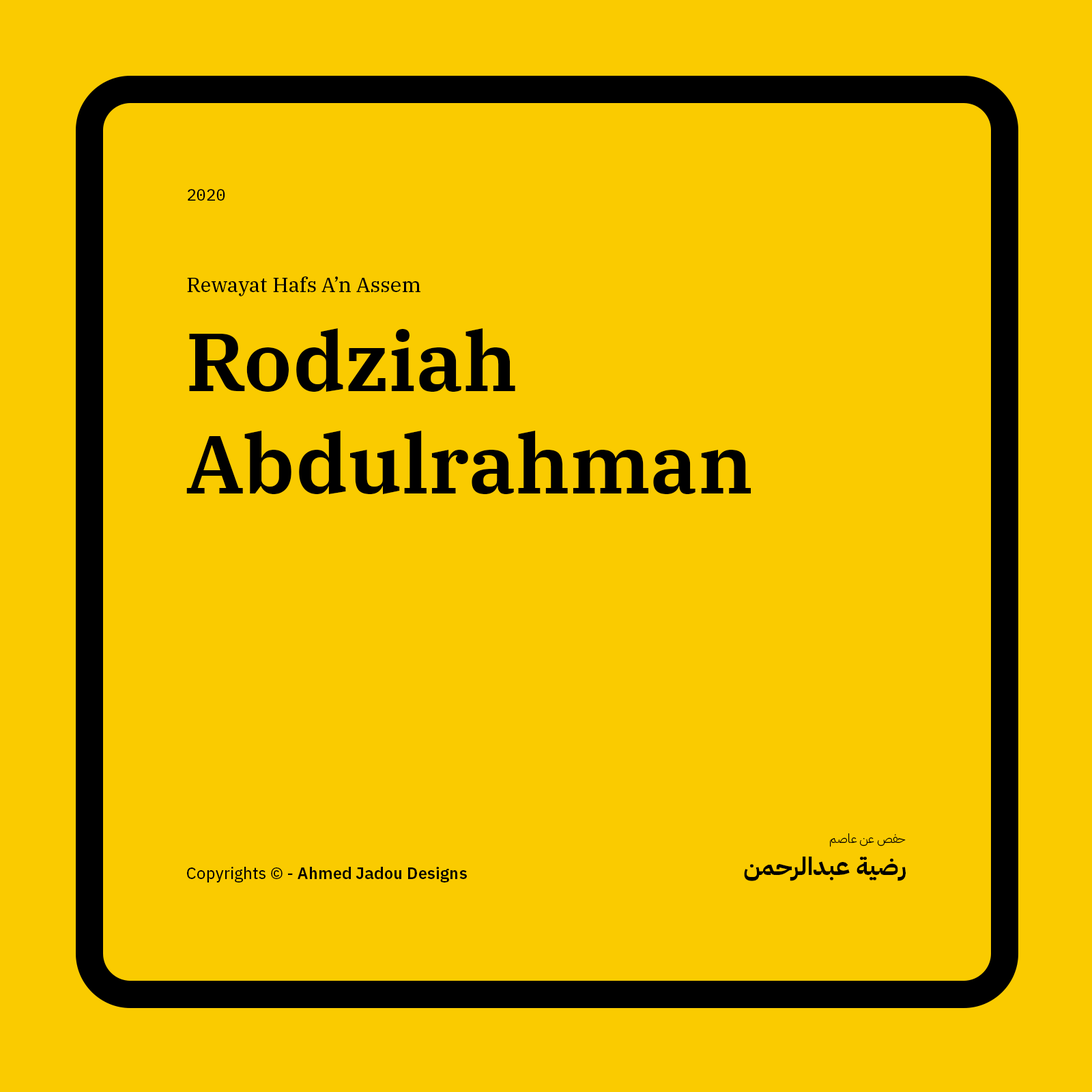
<style>
.page{position:relative;width:1092px;height:1092px;background:#facb00}
.page>*{position:absolute;margin:0}
.t1{font:16.4px "IBMPlexMono-Text";color:#000000}
.t2{font:20.5px "IBMPlexSerif-Text";color:#000000}
.t3{font:81.9px/102.7px "IBMPlexSerif-SemiBold";color:#000000}
.t4{font:12.3px "IBMPlexArabic-Light";color:#000000}
.t5{font:24.6px "IBMPlexArabic-Bold";color:#000000}
.t6{font:16.4px "IBMPlexSans-SemiBold";color:#000000}
.t7{font:16.4px "IBMPlexSans-Text";color:#000000}
</style>
<div class="page">
<p class="t1" style="left:188px;top:189px;width:37px;height:12px">2020</p>
<p class="t2" style="left:187px;top:276px;width:233px;height:20px">Rewayat Hafs A’n Assem</p>
<p class="t3" style="left:186px;top:328px;width:565px;height:166px">Rodziah Abdulrahman</p>
<p class="t4" style="left:830px;top:833px;width:76px;height:14px">حفص عن عاصم</p>
<p class="t5" style="left:744px;top:857px;width:162px;height:24px">رضية عبدالرحمن</p>
<p class="t6" style="left:187px;top:867px;width:280px;height:15px"><span class="t7">Copyrights © - </span>Ahmed Jadou Designs</p>
</div>
